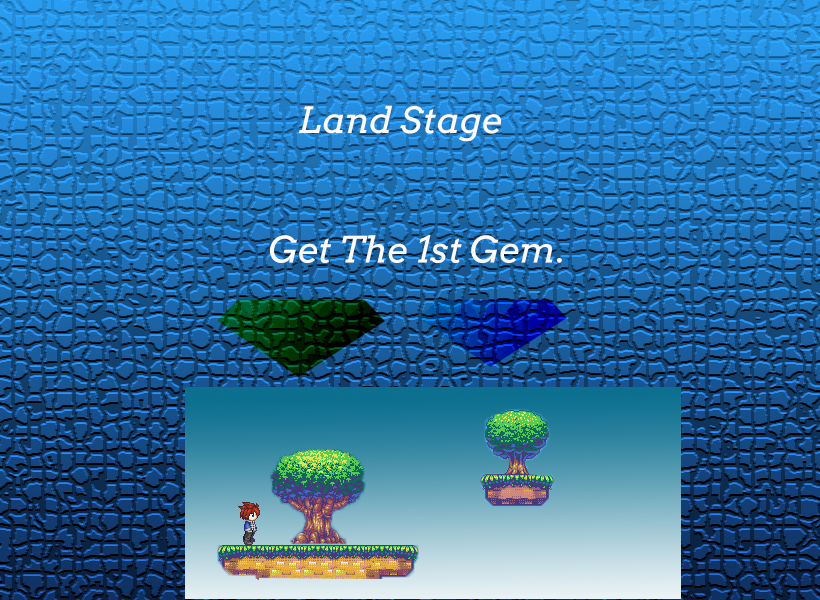
<style>
.page{position:relative;width:820px;height:600px}
.page>*{position:absolute;margin:0}
.t1{font:36px "Arvo-Italic";color:#fefbfb}
</style>
<div class="page">
<p class="t1" style="left:270px;top:105px;width:292px;height:158px;text-align:center">Land Stage <br><br><br>                                                                Get The 1st Gem.</p>
</div>
